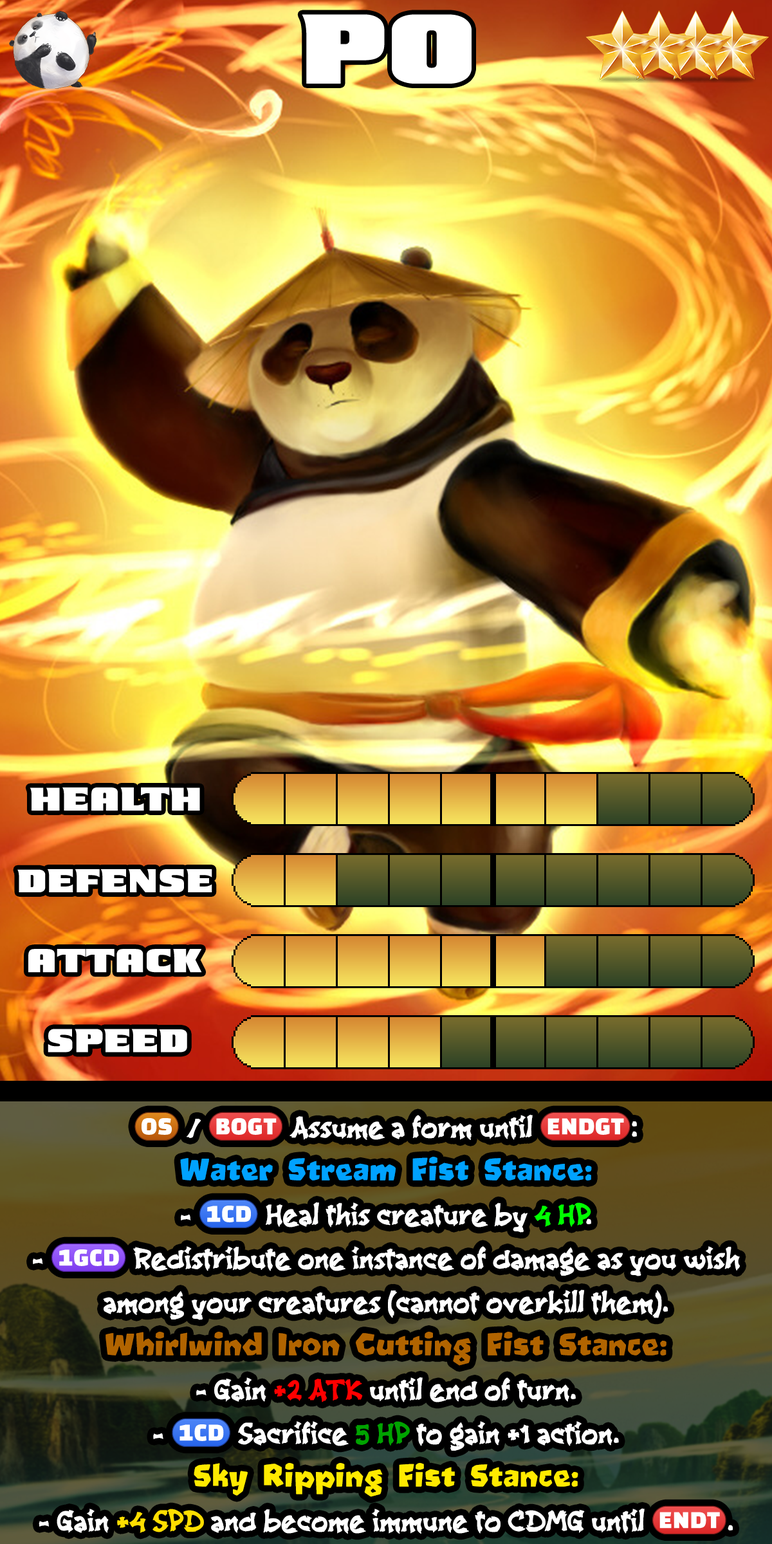
<style>
.page{position:relative;width:772px;height:1544px}
.page>*{position:absolute;margin:0}
.t1{font:173.7px "Kung-Fu-Panda";color:#ffffff}
.t2{font:57.9px "Kung-Fu-Panda";color:#ffffff}
.t3{font:50.2px/43.8px "bBambooGrove";color:#ffffff}
.t4{font:50.2px/43.8px "stoogedings-Regular";letter-spacing:0.243em;color:#ffffff}
.t5{font:50.2px/43.8px "bBambooGrove";letter-spacing:0.243em;color:#ffffff}
.t6{font:50.2px/43.8px "stoogedings-Regular";color:#ffffff}
.t7{font:50.2px/43.8px "Oetztype";color:#00a2ff}
.t8{font:50.2px/43.8px "bBambooGrove";color:#00ff00}
.t9{font:50.2px/43.8px "Oetztype";color:#b16400}
.t10{font:50.2px/43.8px "bBambooGrove";color:#ff0000}
.t11{font:50.2px/43.8px "bBambooGrove";color:#00a300}
.t12{font:50.2px/43.8px "Oetztype";color:#ffea00}
.t13{font:50.2px/43.8px "bBambooGrove";color:#ffde00}
</style>
<div class="page">
<p class="t1" style="left:302px;top:14px;width:170px;height:70px">Po</p>
<p class="t2" style="left:30px;top:788px;width:170px;height:23px">Health</p>
<p class="t2" style="left:17px;top:869px;width:195px;height:23px">Defense</p>
<p class="t2" style="left:28px;top:949px;width:174px;height:24px">Attack</p>
<p class="t2" style="left:48px;top:1029px;width:139px;height:24px">Speed</p>
<p class="t3" style="left:33px;top:1112px;width:707px;height:423px;text-align:center"><span class="t4">(OS)</span><span class="t5">/</span><span class="t6">(BOGT)</span> Assume a form until <span class="t6">(ENDGT)</span>:<br><span class="t7">Water Stream Fist Stance:<br></span>- <span class="t6">(1CD)</span> Heal this creature by <span class="t8">4 HP</span>.<br>- <span class="t6">(1GCD)</span> Redistribute one instance of damage as you wish among your creatures (cannot overkill them).<br><span class="t9">Whirlwind Iron Cutting Fist Stance:<br></span>- Gain <span class="t10">+2 ATK</span> until end of turn.<br>- <span class="t6">(1CD)</span> Sacrifice <span class="t11">5 HP</span> to gain +1 action.<br><span class="t12">Sky Ripping Fist Stance:<br></span>- Gain <span class="t13">+4 SPD</span> and become immune to CDMG until <span class="t6">(ENDT)</span>.</p>
</div>
